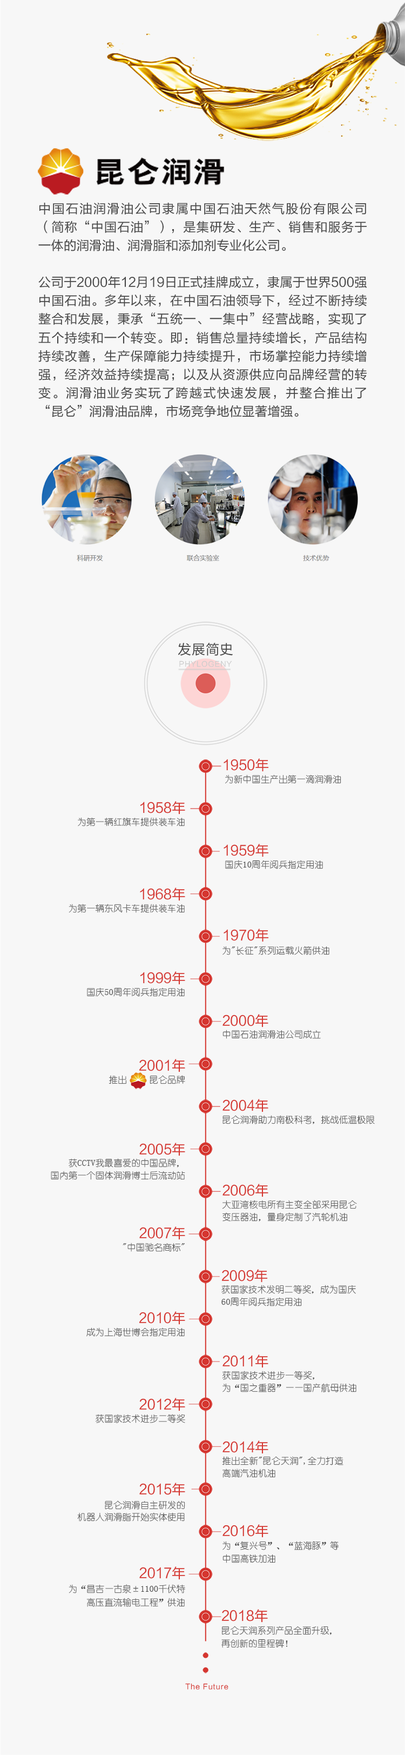
<style>
.page{position:relative;width:405px;height:1755px;background:#f7f7f7}
.page>*{position:absolute;margin:0}
.t1{font:12.8px/18.4px "FZLTHK--GBK1-0";color:#444444}
.t2{font:13.5px "FZLTHK--GBK1-0";letter-spacing:0.04em;color:#444444}
.t3{font:7.1px "FZLTHK--GBK1-0";letter-spacing:0.08em;color:#cccccc}
.t4{font:13.6px "FZLTHK--GBK1-0";color:#d53630}
.t5{font:9px "YouYuan";color:#4c4c4c}
.t6{font:9px/12.3px "YouYuan";color:#4c4c4c}
.t7{font:13.6px/17.8px "FZLTHK--GBK1-0";color:#d53630}
.t8{font:13.6px/19.3px "FZLTHK--GBK1-0";color:#d53630}
.t9{font:9px/13.8px "YouYuan";color:#4c4c4c}
.t10{font:9px/13px "YouYuan";color:#4c4c4c}
.t11{font:13.6px/18.5px "FZLTHK--GBK1-0";color:#d53630}
.t12{font:7.1px "FZLTHK--GBK1-0";letter-spacing:0.08em;color:#d53630}
</style>
<div class="page">
<p class="t1" style="left:38px;top:202px;width:330px;height:216px;text-align:justify">中国石油润滑油公司隶属中国石油天然气股份有限公司（简称“中国石油”），是集研发、生产、销售和服务于一体的润滑油、润滑脂和添加剂专业化公司。<br><br>公司于2000年12月19日正式挂牌成立，隶属于世界500强中国石油。多年以来，在中国石油领导下，经过不断持续整合和发展，秉承“五统一、一集中”经营战略，实现了五个持续和一个转变。即：销售总量持续增长，产品结构持续改善，生产保障能力持续提升，市场掌控能力持续增强，经济效益持续提高；以及从资源供应向品牌经营的转变。润滑油业务实玩了跨越式快速发展，并整合推出了“昆仑”润滑油品牌，市场竞争地位显著增强。</p>
<p class="t2" style="left:178px;top:643px;width:55px;height:13px">发展简史</p>
<p class="t3" style="left:179px;top:660px;width:53px;height:7px">PHYLOGENY</p>
<p class="t4" style="left:224px;top:758px;width:45px;height:14px">1950年</p>
<p class="t5" style="left:225px;top:775px;width:117px;height:9px">为新中国生产出第一滴润滑油</p>
<p class="t4" style="left:140px;top:801px;width:45px;height:14px">1958年</p>
<p class="t5" style="left:78px;top:817px;width:107px;height:9px">为第一辆红旗车提供装车油</p>
<p class="t4" style="left:224px;top:844px;width:45px;height:13px">1959年</p>
<p class="t5" style="left:225px;top:860px;width:98px;height:9px">国庆10周年阅兵指定用油</p>
<p class="t4" style="left:140px;top:887px;width:45px;height:14px">1968年</p>
<p class="t5" style="left:69px;top:904px;width:116px;height:9px">为第一辆东风卡车提供装车油</p>
<p class="t4" style="left:224px;top:929px;width:45px;height:13px">1970年</p>
<p class="t5" style="left:223px;top:946px;width:107px;height:9px">为"长征"系列运载火箭供油</p>
<p class="t6" style="left:87px;top:971px;width:98px;height:26px;text-align:right"><span class="t7">1999年<br></span>国庆50周年阅兵指定用油</p>
<p class="t6" style="left:223px;top:1014px;width:98px;height:25px"><span class="t7">2000年<br></span>中国石油润滑油公司成立</p>
<p class="t6" style="left:109px;top:1059px;width:76px;height:25px;text-align:right"><span class="t7">2001年<br></span>推出     昆仑品牌</p>
<p class="t6" style="left:223px;top:1099px;width:152px;height:25px"><span class="t7">2004年<br></span>昆仑润滑助力南极科考，挑战低温极限</p>
<p class="t6" style="left:51px;top:1143px;width:134px;height:37px;text-align:right"><span class="t7">2005年<br></span>获CCTV我最喜爱的中国品牌，<br>国内第一个固体润滑博士后流动站</p>
<p class="t6" style="left:222px;top:1184px;width:135px;height:38px"><span class="t7">2006年<br></span>大亚湾核电所有主变全部采用昆仑<br>变压器油，量身定制了汽轮机油</p>
<p class="t6" style="left:123px;top:1226px;width:62px;height:26px;text-align:right"><span class="t7">2007年<br></span>"中国驰名商标"</p>
<p class="t6" style="left:222px;top:1269px;width:134px;height:37px"><span class="t7">2009年<br></span>获国家技术发明二等奖，成为国庆<br>60周年阅兵指定用油</p>
<p class="t6" style="left:86px;top:1311px;width:99px;height:26px;text-align:right"><span class="t7">2010年<br></span>成为上海世博会指定用油</p>
<p class="t6" style="left:222px;top:1354px;width:135px;height:38px"><span class="t7">2011年<br></span>获国家技术进步一等奖，<br>为“国之重器”——国产航母供油</p>
<p class="t6" style="left:96px;top:1398px;width:89px;height:25px;text-align:right"><span class="t7">2012年<br></span>获国家技术进步二等奖</p>
<p class="t6" style="left:222px;top:1440px;width:122px;height:38px"><span class="t7">2014年<br></span>推出全新"昆仑天润",全力打造<br>高端汽油机油</p>
<p class="t6" style="left:77px;top:1483px;width:108px;height:39px;text-align:right"><span class="t8">2015年<br></span><span class="t9">昆仑润滑自主研发的<br></span>机器人润滑脂开始实体使用</p>
<p class="t10" style="left:223px;top:1524px;width:116px;height:39px"><span class="t11">2016年<br></span>为“复兴号”、“蓝海豚”等<br>中国高铁加油</p>
<p class="t9" style="left:69px;top:1566px;width:116px;height:41px;text-align:right"><span class="t8">2017年<br></span>为“昌吉—古泉±1100千伏特<br>高压直流输电工程”供油</p>
<p class="t10" style="left:222px;top:1609px;width:110px;height:39px"><span class="t11">2018年<br></span>昆仑天润系列产品全面升级，<br>再创新的里程碑！</p>
<p class="t12" style="left:185px;top:1683px;width:44px;height:7px">The Future</p>
</div>
